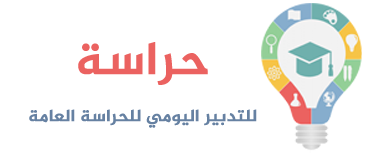
<style>
.page{position:relative;width:369px;height:157px;background:#ffffff}
.page>*{position:absolute;margin:0}
.t1{font:46.9px "Al-Jazeera-Arabic-Bold";color:#eb6260;font-weight:bold}
.t2{font:17.1px "Al-Jazeera-Arabic-Bold";color:#6681a2;font-weight:bold}
</style>
<div class="page">
<p class="t1" style="left:78px;top:42px;width:130px;height:43px">حراسة</p>
<p class="t2" style="left:29px;top:109px;width:228px;height:19px">للتدبير اليومي للحراسة العامة</p>
</div>
